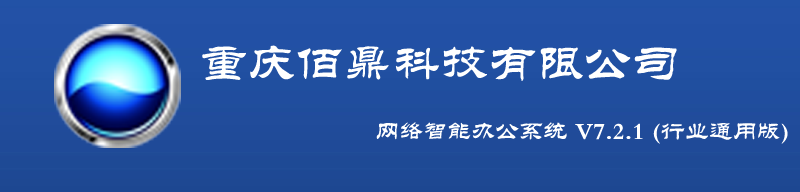
<style>
.page{position:relative;width:800px;height:192px}
.page>*{position:absolute;margin:0}
.t1{font:24px/60px "FZL2JW--GB1-0";color:#ffffff}
.t2{font:48px/60px "FZL2JW--GB1-0";color:#ffffff}
</style>
<div class="page">
<p class="t1" style="left:202px;top:45px;width:586px;height:99px"><span class="t2">重庆佰鼎科技有限公司<br>           </span>网络智能办公系统 V7.2.1 (行业通用版)</p>
</div>
